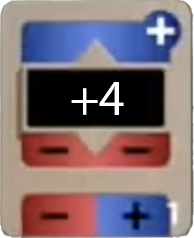
<style>
.page{position:relative;width:194px;height:238px}
.page>*{position:absolute;margin:0}
.t1{font:50px "MyriadPro-Regular";color:#ffffff}
</style>
<div class="page">
<p class="t1" style="left:71px;top:82px;width:53px;height:33px">+4</p>
</div>
